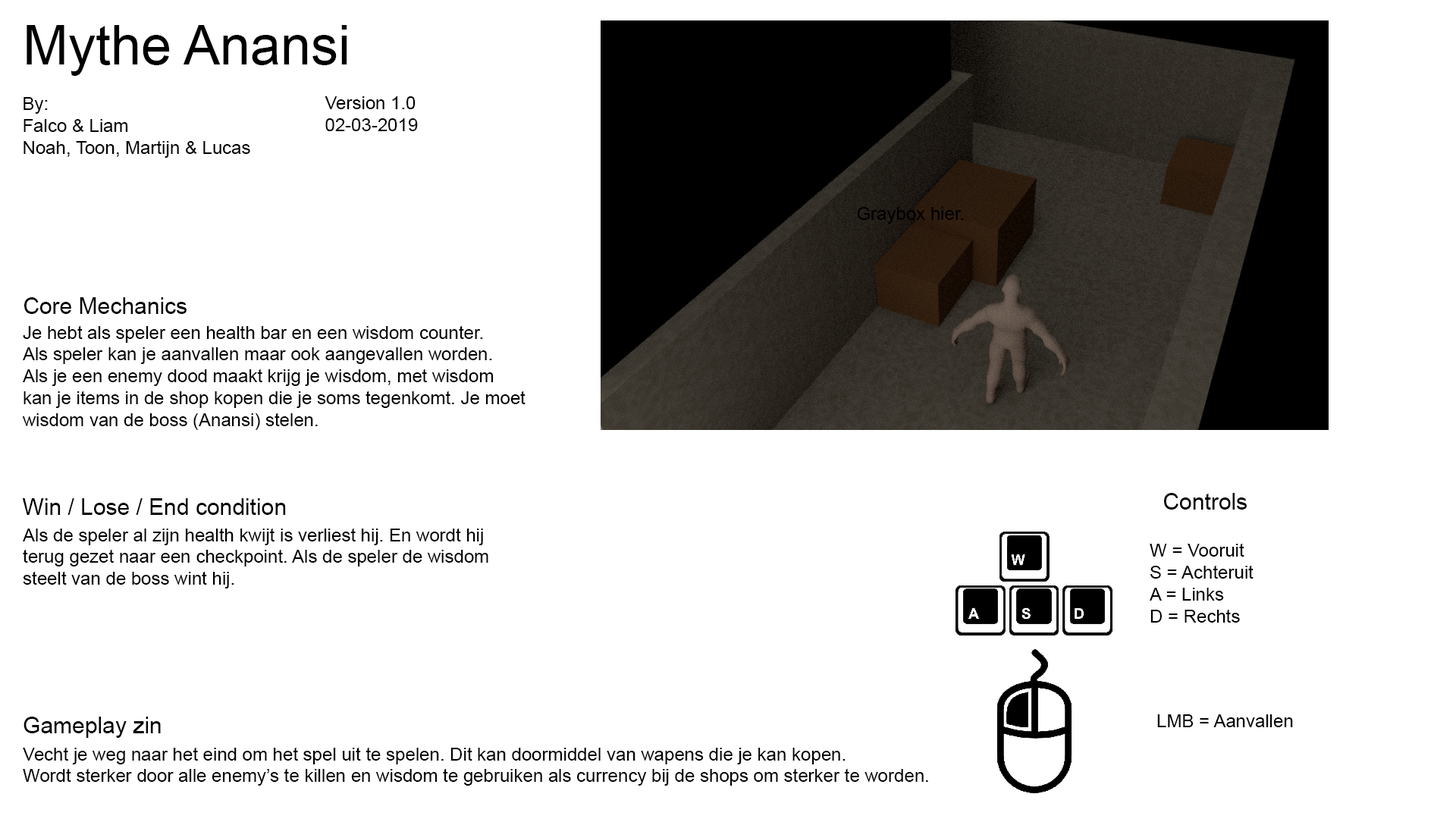
<style>
.page{position:relative;width:1456px;height:819px;background:#ffffff}
.page>*{position:absolute;margin:0}
.t1{font:54.6px "ArialMT";color:#000000}
.t2{font:18.2px "ArialMT";color:#000000}
.t3{font:22.7px "ArialMT";color:#000000}
</style>
<div class="page">
<p class="t1" style="left:27px;top:25px;width:320px;height:51px">Mythe Anansi</p>
<p class="t2" style="left:24px;top:97px;width:226px;height:61px">By:<br>Falco &amp; Liam<br>Noah, Toon, Martijn &amp; Lucas</p>
<p class="t2" style="left:325px;top:96px;width:93px;height:35px">Version 1.0<br>02-03-2019</p>
<p class="t2" style="left:857px;top:207px;width:107px;height:17px">Graybox hier.</p>
<p class="t3" style="left:24px;top:297px;width:163px;height:17px">Core Mechanics</p>
<p class="t2" style="left:22px;top:325px;width:504px;height:105px">Je hebt als speler een health bar en een wisdom counter. <br>Als speler kan je aanvallen maar ook aangevallen worden.<br>Als je een enemy dood maakt krijg je wisdom, met wisdom<br>kan je items in de shop kopen die je soms tegenkomt. Je moet <br>wisdom van de boss (Anansi) stelen.</p>
<p class="t3" style="left:1164px;top:493px;width:83px;height:17px">Controls</p>
<p class="t3" style="left:22px;top:498px;width:264px;height:17px">Win / Lose / End condition</p>
<p class="t2" style="left:23px;top:528px;width:465px;height:60px">Als de speler al zijn health kwijt is verliest hij. En wordt hij <br>terug gezet naar een checkpoint. Als de speler de wisdom <br>steelt van de boss wint hij.</p>
<p class="t2" style="left:1150px;top:543px;width:104px;height:80px">W = Vooruit<br>S = Achteruit<br>A = Links<br>D = Rechts</p>
<p class="t3" style="left:24px;top:717px;width:137px;height:21px">Gameplay zin</p>
<p class="t2" style="left:1157px;top:714px;width:136px;height:13px">LMB = Aanvallen</p>
<p class="t2" style="left:23px;top:747px;width:905px;height:39px">Vecht je weg naar het eind om het spel uit te spelen. Dit kan doormiddel van wapens die je kan kopen.<br>Wordt sterker door alle enemy’s te killen en wisdom te gebruiken als currency bij de shops om sterker te worden.</p>
</div>
